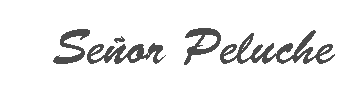
<style>
.page{position:relative;width:350px;height:99px;background:#ffffff}
.page>*{position:absolute;margin:0}
.t1{font:50px "BrushScriptStd";color:#4b4b4b}
</style>
<div class="page">
<p class="t1" style="left:53px;top:28px;width:282px;height:37px">Señor Peluche</p>
</div>
